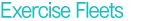
<style>
.page{position:relative;width:145px;height:21px;background:#ffffff}
.page>*{position:absolute;margin:0}
.t1{font:20px "GothicMB101Pro-Regular";letter-spacing:-0.06em;color:#1dbcc0;scale:0.9 1}
</style>
<div class="page">
<p class="t1" style="left:1px;top:2px;width:123px;height:16px">Exercise Fleets</p>
</div>
